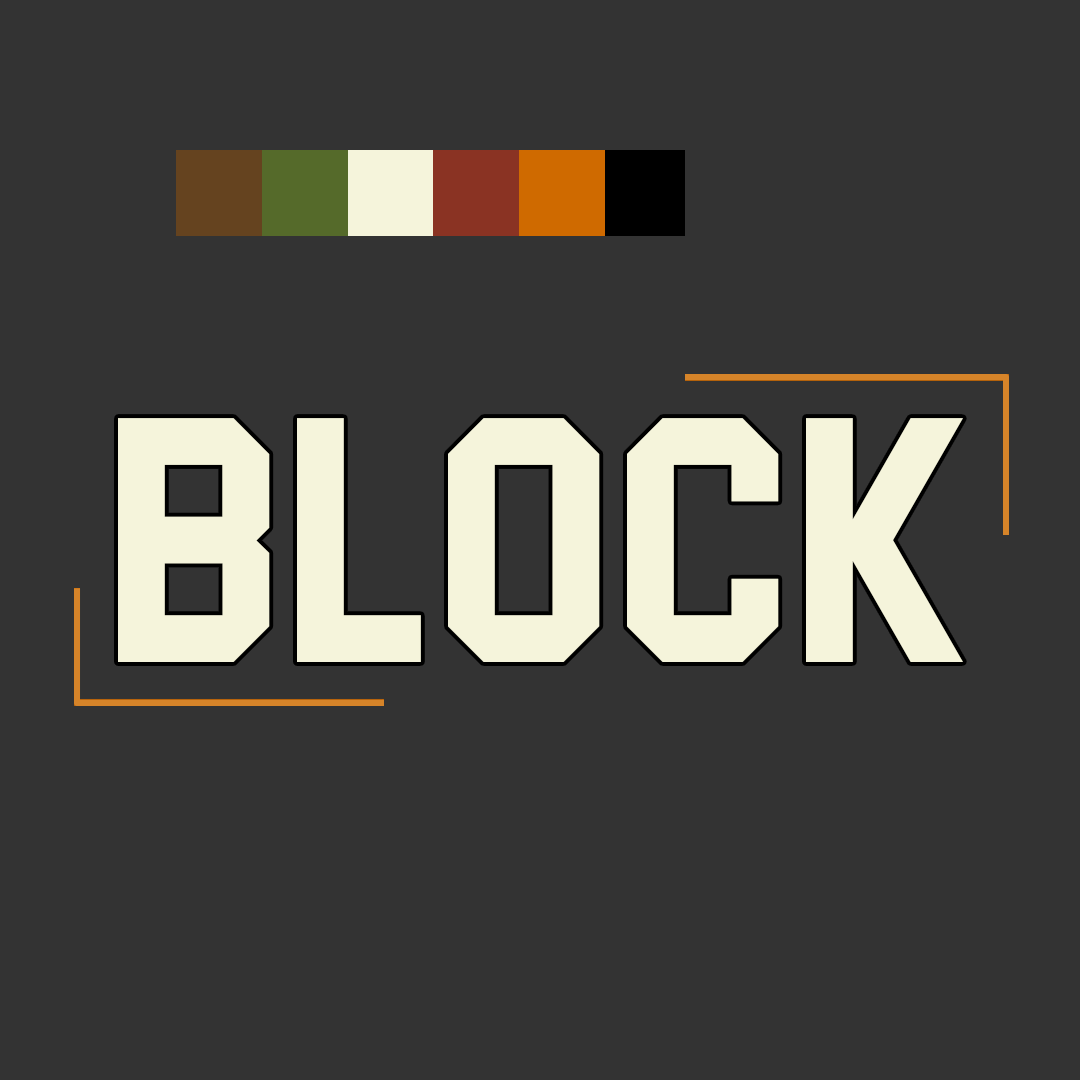
<style>
.page{position:relative;width:1080px;height:1080px;background:#333333}
.page>*{position:absolute;margin:0}
.t1{font:356.9px "Blockletter";letter-spacing:0.005em;color:#f5f4db}
</style>
<div class="page">
<p class="t1" style="left:118px;top:418px;width:845px;height:244px">Block</p>
</div>
